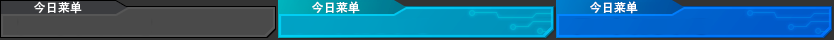
<style>
.page{position:relative;width:834px;height:40px}
.page>*{position:absolute;margin:0}
.t1{font:12px "AdobeHeitiStd-Regular";color:#ffffff}
</style>
<div class="page">
<p class="t1" style="left:34px;top:1px;width:48px;height:13px">今日菜单</p>
<p class="t1" style="left:312px;top:1px;width:48px;height:13px">今日菜单</p>
<p class="t1" style="left:590px;top:1px;width:48px;height:13px">今日菜单</p>
</div>
